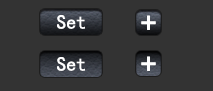
<style>
.page{position:relative;width:213px;height:91px;background:#333333}
.page>*{position:absolute;margin:0}
.t1{font:20px "SimHei";color:#ffffff}
.t2{font:30px "SimHei";color:#ffffff;font-weight:bold}
</style>
<div class="page">
<p class="t1" style="left:57px;top:15px;width:28px;height:14px">Set</p>
<p class="t2" style="left:141px;top:15px;width:15px;height:15px">+</p>
<p class="t1" style="left:57px;top:57px;width:28px;height:14px">Set</p>
<p class="t2" style="left:141px;top:56px;width:15px;height:15px">+</p>
</div>
